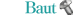
<style>
.page{position:relative;width:73px;height:15px;background:#ffffff}
.page>*{position:absolute;margin:0}
.t1{font:16px "RyuminPro-ExBold";letter-spacing:-0.08em;color:#239e9f}
</style>
<div class="page">
<p class="t1" style="left:25px;top:1px;width:32px;height:13px">Baut</p>
</div>
